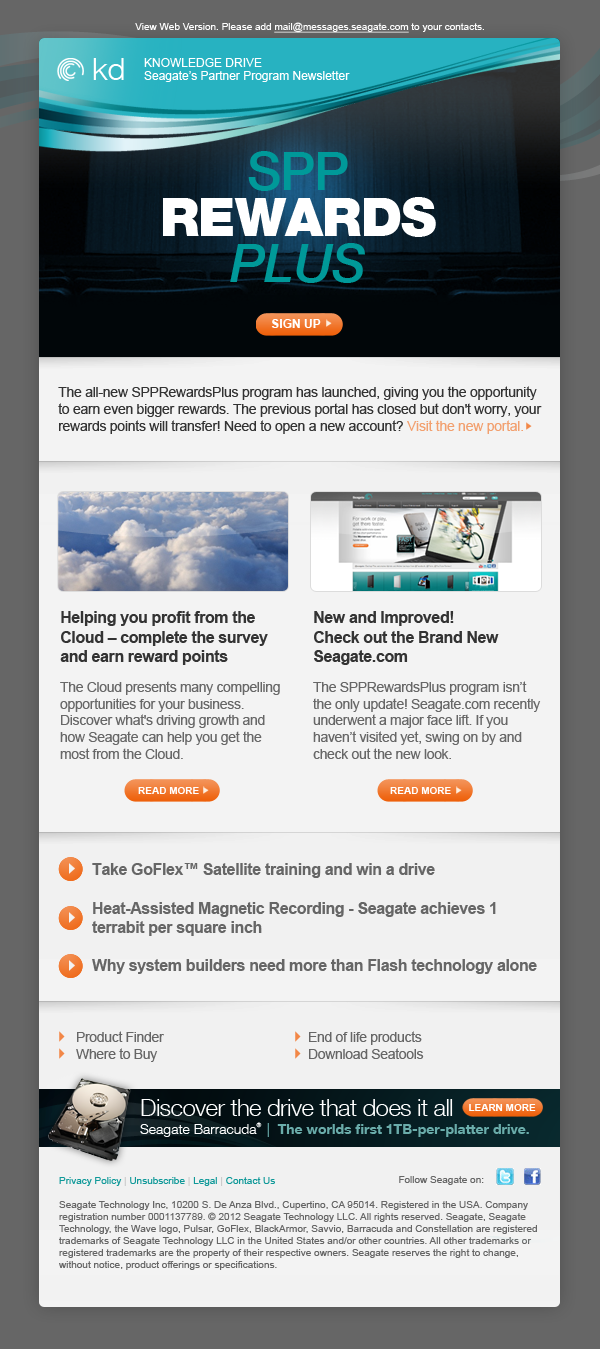
<style>
.page{position:relative;width:600px;height:1349px;background:#f3f3f3}
.page>*{position:absolute;margin:0}
.t1{font:10px "ArialMT";color:#fdfdfd}
.t2{font:10px "ArialMT";color:#fdfdfd;text-decoration:underline}
.t3{font:31px "HelveticaNeueLTCom-Lt";color:#ffffff}
.t4{font:12px/13px "ArialMT";color:#ffffff}
.t5{font:53px/46px "HelveticaNeueLTCom-Blk";letter-spacing:-0.018em;color:#ffffff}
.t6{font:53px/46px "HelveticaNeueLTCom-Md";letter-spacing:-0.018em;color:#009999}
.t7{font:53px/46px "HelveticaNeueLTCom-MdIt";letter-spacing:-0.018em;color:#009999}
.t8{font:12px "Arial-BoldMT";color:#ffffff;text-transform:uppercase}
.t9{font:14px "ArialMT";letter-spacing:-0.018em;color:#333333}
.t10{font:14px "ArialMT";letter-spacing:-0.018em;color:#f2a06f}
.t11{font:16px "Arial-BoldMT";letter-spacing:-0.024em;color:#333333}
.t12{font:14px "ArialMT";letter-spacing:-0.023em;color:#676767}
.t13{font:10px "Arial-BoldMT";color:#ffffff;text-transform:uppercase}
.t14{font:16px "Arial-BoldMT";letter-spacing:-0.023em;color:#666666}
.t15{font:14px "ArialMT";letter-spacing:-0.023em;color:#666666}
.t16{font:24px "HelveticaNeueLTCom-Lt";letter-spacing:-0.026em;color:#ffffff}
.t17{font:14px "HelveticaNeueLTCom-Bd";color:#6aacaa}
.t18{font:14px "HelveticaNeueLTCom-Lt";color:#ffffff}
.t19{font:6px "HelveticaNeueLTCom-Lt";color:#ffffff}
.t20{font:14px "HelveticaNeueLTCom-Lt";color:#6aacaa}
.t21{font:10px "ArialMT";color:#666666}
.t22{font:10px "ArialMT";color:#109999}
.t23{font:10px "ArialMT";color:#cccccc}
</style>
<div class="page">
<p class="t1" style="left:135px;top:22px;width:349px;height:11px">View Web Version. Please add <span class="t2">mail@messages.seagate.com</span> to your contacts.</p>
<p class="t3" style="left:93px;top:58px;width:31px;height:22px">kd</p>
<p class="t4" style="left:144px;top:58px;width:206px;height:24px">KNOWLEDGE DRIVE<br>Seagate’s Partner Program Newsletter</p>
<p class="t5" style="left:163px;top:151px;width:273px;height:132px;text-align:center"><span class="t6">SPP<br></span>REWARDS<br><span class="t7">PLUS</span></p>
<p class="t8" style="left:271px;top:319px;width:50px;height:9px">SIGN UP</p>
<p class="t9" style="left:58px;top:386px;width:484px;height:48px">The all-new SPPRewardsPlus program has launched, giving you the opportunity to earn even bigger rewards. The previous portal has closed but don't worry, your rewards points will transfer! Need to open a new account? <span class="t10">Visit the new portal.</span></p>
<p class="t11" style="left:60px;top:611px;width:208px;height:54px">Helping you profit from the Cloud – complete the survey and earn reward points</p>
<p class="t11" style="left:314px;top:611px;width:185px;height:54px">New and Improved!<br>Check out the Brand New Seagate.com</p>
<p class="t12" style="left:60px;top:681px;width:220px;height:78px">The Cloud presents many compelling opportunities for your business. Discover what's driving growth and how Seagate can help you get the most from the Cloud.</p>
<p class="t12" style="left:313px;top:681px;width:228px;height:78px">The SPPRewardsPlus program isn’t the only update! Seagate.com recently underwent a major face lift. If you haven’t visited yet, swing on by and check out the new look.</p>
<p class="t13" style="left:138px;top:787px;width:61px;height:7px">read more</p>
<p class="t13" style="left:390px;top:787px;width:61px;height:7px">read more</p>
<p class="t14" style="left:92px;top:863px;width:445px;height:111px">Take GoFlex™ Satellite training and win a drive<br><br>Heat-Assisted Magnetic Recording - Seagate achieves 1 terrabit per square inch<br><br>Why system builders need more than Flash technology alone</p>
<p class="t15" style="left:76px;top:1031px;width:88px;height:31px">Product Finder<br>Where to Buy</p>
<p class="t15" style="left:309px;top:1031px;width:115px;height:28px">End of life products<br>Download Seatools</p>
<p class="t16" style="left:141px;top:1099px;width:312px;height:17px">Discover the drive that does it all</p>
<p class="t13" style="left:469px;top:1104px;width:67px;height:7px">LEARN MORE</p>
<p class="t17" style="left:140px;top:1122px;width:389px;height:15px"><span class="t18">Seagate Barracuda</span><span class="t19">®  </span><span class="t20">|  </span>The worlds first 1TB-per-platter drive.</p>
<p class="t21" style="left:59px;top:1177px;width:478px;height:93px"><span class="t22">Privacy Policy</span><span class="t23"> |</span><span class="t22"> Unsubscribe </span><span class="t23">|</span><span class="t22"> Legal </span><span class="t23">|</span><span class="t22"> Contact Us<br><br></span>Seagate Technology Inc, 10200 S. De Anza Blvd., Cupertino, CA 95014. Registered in the USA. Company registration number 0001137789. © 2012 Seagate Technology LLC. All rights reserved. Seagate, Seagate Technology, the Wave logo, Pulsar, GoFlex, BlackArmor, Savvio, Barracuda and Constellation are registered trademarks of Seagate Technology LLC in the United States and/or other countries. All other trademarks or registered trademarks are the property of their respective owners. Seagate reserves the right to change, without notice, product offerings or specifications.</p>
<p class="t21" style="left:399px;top:1176px;width:85px;height:9px">Follow Seagate on:</p>
</div>
